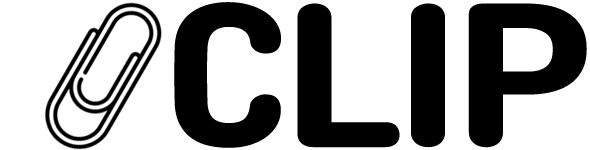
<style>
.page{position:relative;width:590px;height:150px;background:#ffffff}
.page>*{position:absolute;margin:0}
.t1{font:187.5px "Cafe24Ssurround";letter-spacing:-0.04em;color:#000000;font-weight:bold}
</style>
<div class="page">
<p class="t1" style="left:174px;top:2px;width:413px;height:146px">CLIP</p>
</div>
